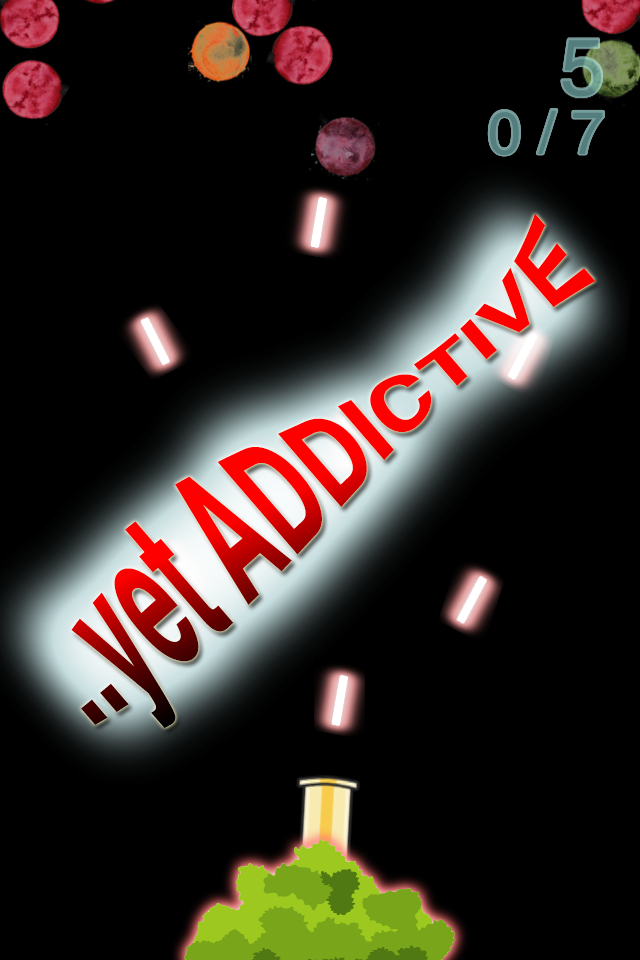
<style>
.page{position:relative;width:640px;height:960px;background:#000000}
.page>*{position:absolute;margin:0}
.t1{font:130.7px "Helvetica-Bold";scale:0.68 1}
</style>
<div class="page">
<p class="t1" style="left:71px;top:213px;width:525px;height:515px;rotate:-41deg">..yet ADDICTIVE</p>
</div>
